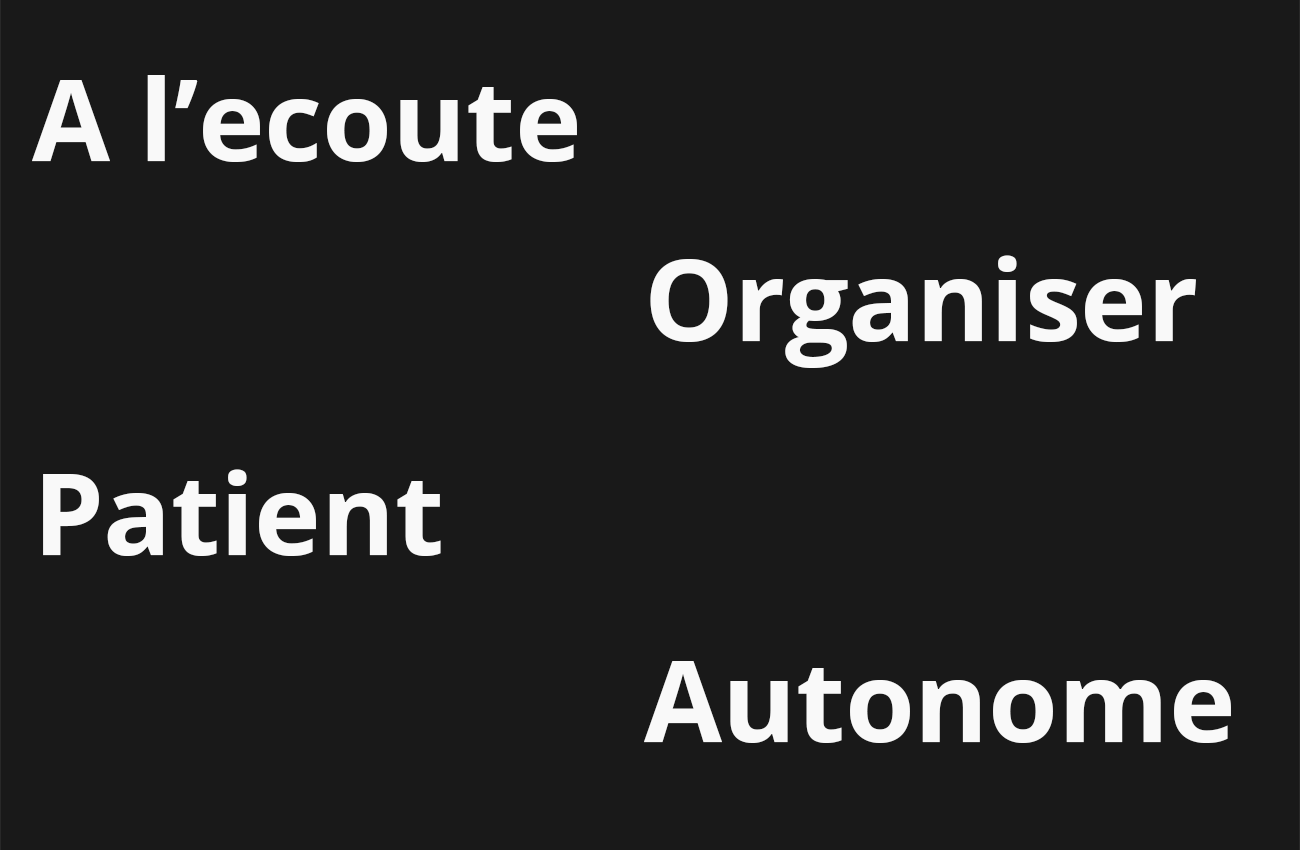
<style>
.page{position:relative;width:1300px;height:850px;background:#191919}
.page>*{position:absolute;margin:0}
.t1{font:112.5px "OpenSansRoman-Bold";color:#f9f9f9}
</style>
<div class="page">
<p class="t1" style="left:32px;top:75px;width:545px;height:87px">A l’ecoute</p>
<p class="t1" style="left:650px;top:255px;width:546px;height:113px">Organiser</p>
<p class="t1" style="left:43px;top:469px;width:398px;height:87px">Patient</p>
<p class="t1" style="left:644px;top:661px;width:587px;height:82px">Autonome</p>
</div>
